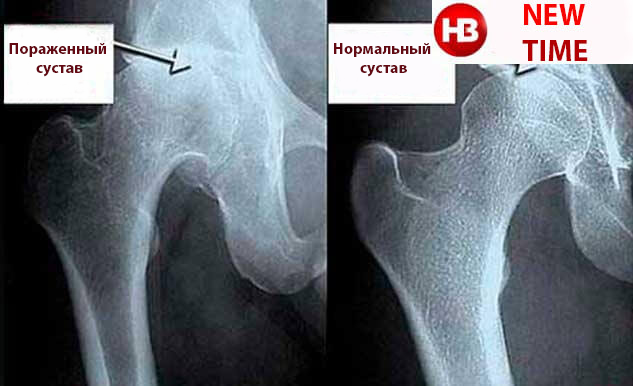
<style>
.page{position:relative;width:633px;height:386px}
.page>*{position:absolute;margin:0}
.t1{font:16px "MyriadPro-Bold";color:#630913}
</style>
<div class="page">
<p class="t1" style="left:9px;top:43px;width:97px;height:34px;text-align:center">Пораженный<br> сустав</p>
<p class="t1" style="left:334px;top:43px;width:97px;height:34px;text-align:center">Нормальный <br>сустав</p>
</div>
